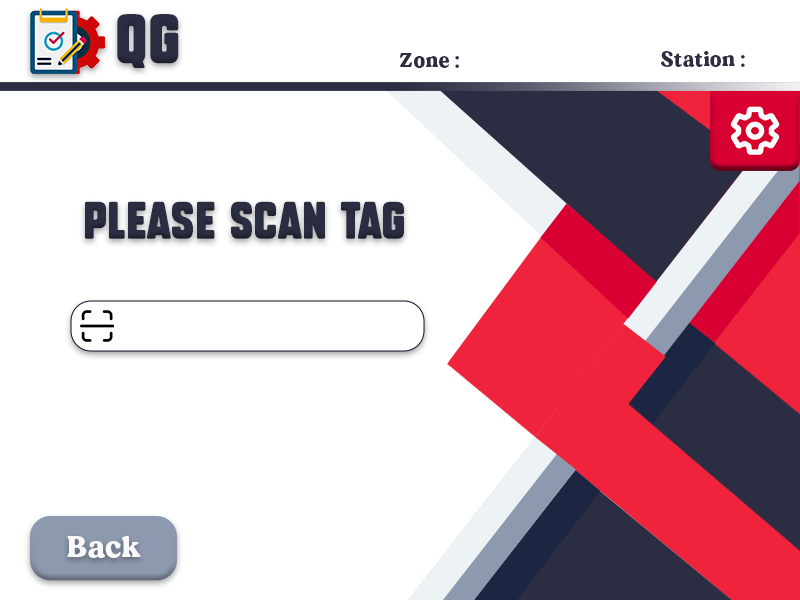
<style>
.page{position:relative;width:800px;height:600px;background:#ffffff}
.page>*{position:absolute;margin:0}
.t1{font:48px "SubtleCurves";letter-spacing:0.025em;color:#2b2d42}
.t2{font:20px "MADEDillan";letter-spacing:0.025em;color:#2b2d42}
.t3{font:36px "SubtleCurves";letter-spacing:0.025em;color:#2b2d42}
.t4{font:30px "MADEDillan";letter-spacing:0.025em;color:#f9f9f9}
</style>
<div class="page">
<p class="t1" style="left:117px;top:14px;width:62px;height:54px">QG</p>
<p class="t2" style="left:400px;top:53px;width:59px;height:15px">Zone :</p>
<p class="t2" style="left:661px;top:51px;width:84px;height:16px">Station :</p>
<p class="t3" style="left:85px;top:201px;width:319px;height:38px">Please Scan Tag</p>
<p class="t4" style="left:67px;top:536px;width:74px;height:22px">Back</p>
</div>
